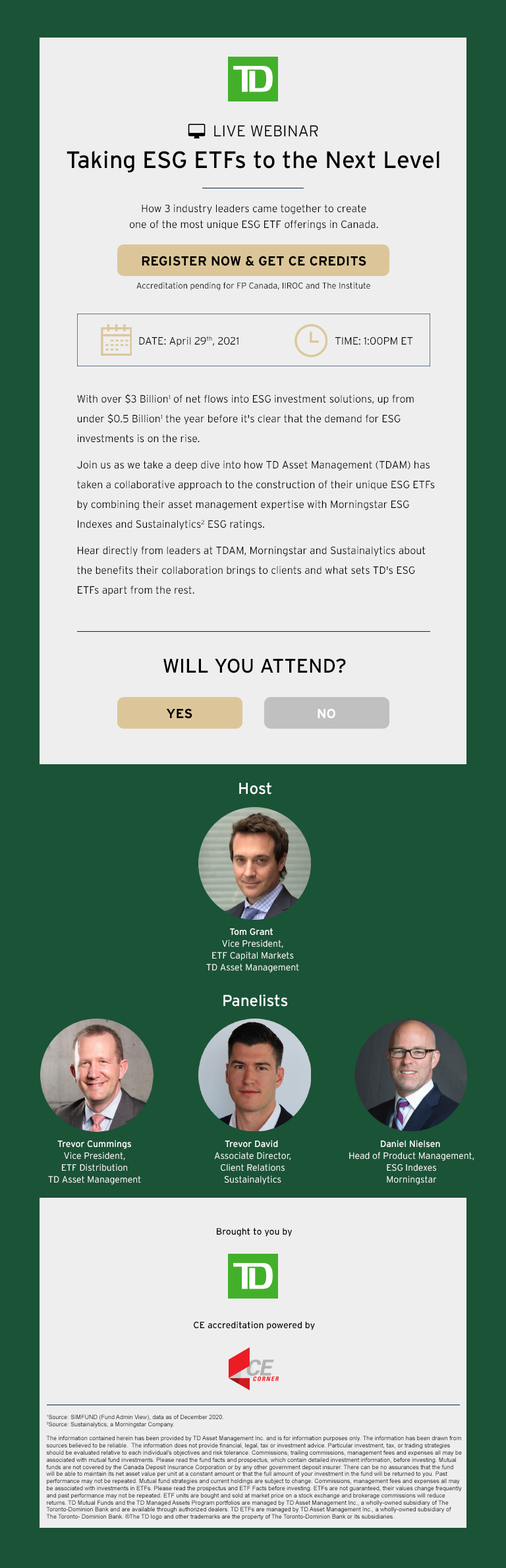
<style>
.page{position:relative;width:506px;height:1568px;background:#eeeeee}
.page>*{position:absolute;margin:0}
.t1{font:15.8px "Interstate-Light";color:#000000}
.t2{font:23.7px "Interstate-Regular";color:#000000}
.t3{font:10.5px/15.8px "Interstate-Light";color:#000000}
.t4{font:13.2px "Interstate-Bold";color:#000000}
.t5{font:8.6px "Interstate-Light";color:#000000}
.t6{font:10.5px "Interstate-Light";color:#000000}
.t7{font:10.5px/19.8px "Interstate-Light";color:#000000}
.t8{font:10.5px/26.4px "Interstate-Light";color:#000000}
.t9{font:19.8px "Interstate-Regular";color:#000000}
.t10{font:13.2px "Interstate-Bold";color:#ffffff}
.t11{font:15.8px "Interstate-Regular";color:#ffffff}
.t12{font:9.2px/11.9px "Interstate-Light";color:#ffffff}
.t13{font:9.2px/11.9px "Interstate-Regular";color:#ffffff}
.t14{font:9.2px "Interstate-Regular";color:#000000}
.t15{font:5.9px "ArialMT";color:#000000}
</style>
<div class="page">
<p class="t1" style="left:214px;top:125px;width:104px;height:11px">LIVE WEBINAR</p>
<p class="t2" style="left:67px;top:150px;width:372px;height:23px">Taking ESG ETFs to the Next Level</p>
<p class="t3" style="left:130px;top:204px;width:248px;height:26px;text-align:center">How 3 industry leaders came together to create<br>one of the most unique ESG ETF offerings in Canada.</p>
<p class="t4" style="left:142px;top:256px;width:224px;height:10px">REGISTER NOW &amp; GET CE CREDITS</p>
<p class="t5" style="left:136px;top:282px;width:234px;height:9px">Accreditation pending for FP Canada, IIROC and The Institute</p>
<p class="t6" style="left:139px;top:336px;width:99px;height:11px">DATE: April 29th, 2021</p>
<p class="t6" style="left:335px;top:337px;width:78px;height:8px">TIME: 1:00PM ET</p>
<p class="t7" style="left:77px;top:394px;width:358px;height:202px">With over $3 Billion1 of net flows into ESG investment solutions, up from<br>under $0.5 Billion1 the year before it's clear that the demand for ESG<br>investments is on the rise.  <br><span class="t8">Join us as we take a deep dive into how TD Asset Management (TDAM) has<br></span>taken a collaborative approach to the construction of their unique ESG ETFs<br>by combining their asset management expertise with Morningstar ESG<br>Indexes and Sustainalytics2 ESG ratings.  <br><span class="t8">Hear directly from leaders at TDAM, Morningstar and Sustainalytics about<br></span>the benefits their collaboration brings to clients and what sets TD's ESG<br>ETFs apart from the rest.</p>
<p class="t9" style="left:163px;top:658px;width:183px;height:15px">WILL YOU ATTEND?</p>
<p class="t4" style="left:166px;top:708px;width:26px;height:11px">YES</p>
<p class="t10" style="left:318px;top:708px;width:17px;height:11px">NO</p>
<p class="t11" style="left:239px;top:782px;width:32px;height:13px">Host</p>
<p class="t12" style="left:206px;top:928px;width:93px;height:44px;text-align:center"><span class="t13">Tom Grant <br></span>Vice President,<br>ETF Capital Markets<br>TD Asset Management</p>
<p class="t11" style="left:223px;top:994px;width:65px;height:13px">Panelists</p>
<p class="t12" style="left:48px;top:1140px;width:93px;height:45px;text-align:center"><span class="t13">Trevor Cummings<br></span>Vice President,<br>ETF Distribution<br>TD Asset Management</p>
<p class="t12" style="left:214px;top:1140px;width:77px;height:45px;text-align:center"><span class="t13">Trevor David <br></span>Associate Director,<br>Client Relations<br>Sustainalytics</p>
<p class="t12" style="left:349px;top:1140px;width:125px;height:45px;text-align:center"><span class="t13">Daniel Nielsen <br></span>Head of Product Management,<br>ESG Indexes<br>Morningstar</p>
<p class="t14" style="left:217px;top:1227px;width:76px;height:10px">Brought to you by</p>
<p class="t14" style="left:194px;top:1321px;width:121px;height:9px">CE accreditation powered by</p>
<p class="t15" style="left:46px;top:1414px;width:416px;height:106px">1Source: SIMFUND (Fund Admin View), data as of December 2020.<br>2Source: Sustainalytics, a Morningstar Company.<br><br>The information contained herein has been provided by TD Asset Management Inc. and is for information purposes only. The information has been drawn from<br>sources believed to be reliable.  The information does not provide financial, legal, tax or investment advice. Particular investment, tax, or trading strategies<br>should be evaluated relative to each individual's objectives and risk tolerance. Commissions, trailing commissions, management fees and expenses all may be<br>associated with mutual fund investments. Please read the fund facts and prospectus, which contain detailed investment information, before investing. Mutual<br>funds are not covered by the Canada Deposit Insurance Corporation or by any other government deposit insurer. There can be no assurances that the fund<br>will be able to maintain its net asset value per unit at a constant amount or that the full amount of your investment in the fund will be returned to you. Past<br>performance may not be repeated. Mutual fund strategies and current holdings are subject to change. Commissions, management fees and expenses all may<br>be associated with investments in ETFs. Please read the prospectus and ETF Facts before investing. ETFs are not guaranteed, their values change frequently<br>and past performance may not be repeated. ETF units are bought and sold at market price on a stock exchange and brokerage commissions will reduce<br>returns. TD Mutual Funds and the TD Managed Assets Program portfolios are managed by TD Asset Management Inc., a wholly-owned subsidiary of The<br>Toronto-Dominion Bank and are available through authorized dealers. TD ETFs are managed by TD Asset Management Inc., a wholly-owned subsidiary of<br>The Toronto- Dominion Bank. ®The TD logo and other trademarks are the property of The Toronto-Dominion Bank or its subsidiaries.</p>
</div>
